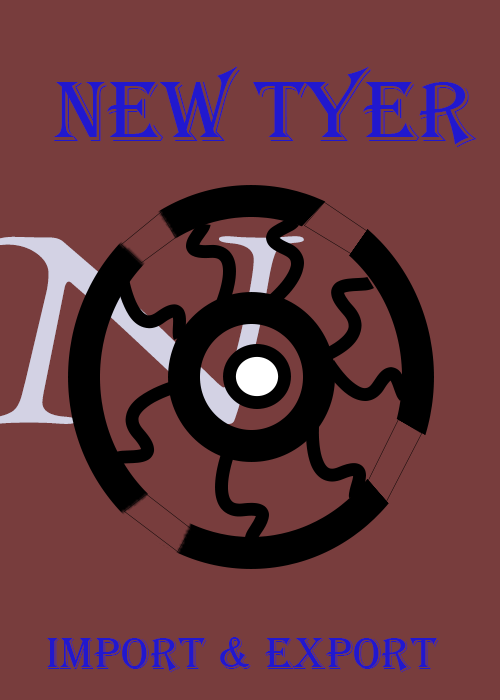
<style>
.page{position:relative;width:500px;height:700px;background:#783d3d}
.page>*{position:absolute;margin:0}
.t1{font:88.7px "Algerian";color:#2118ce}
.t2{font:45.9px "Algerian";color:#2118ce}
</style>
<div class="page">
<p class="t1" style="left:53px;top:66px;width:424px;height:81px">New Tyer</p>
<p class="t2" style="left:47px;top:637px;width:392px;height:36px">Import &amp; Export</p>
</div>
